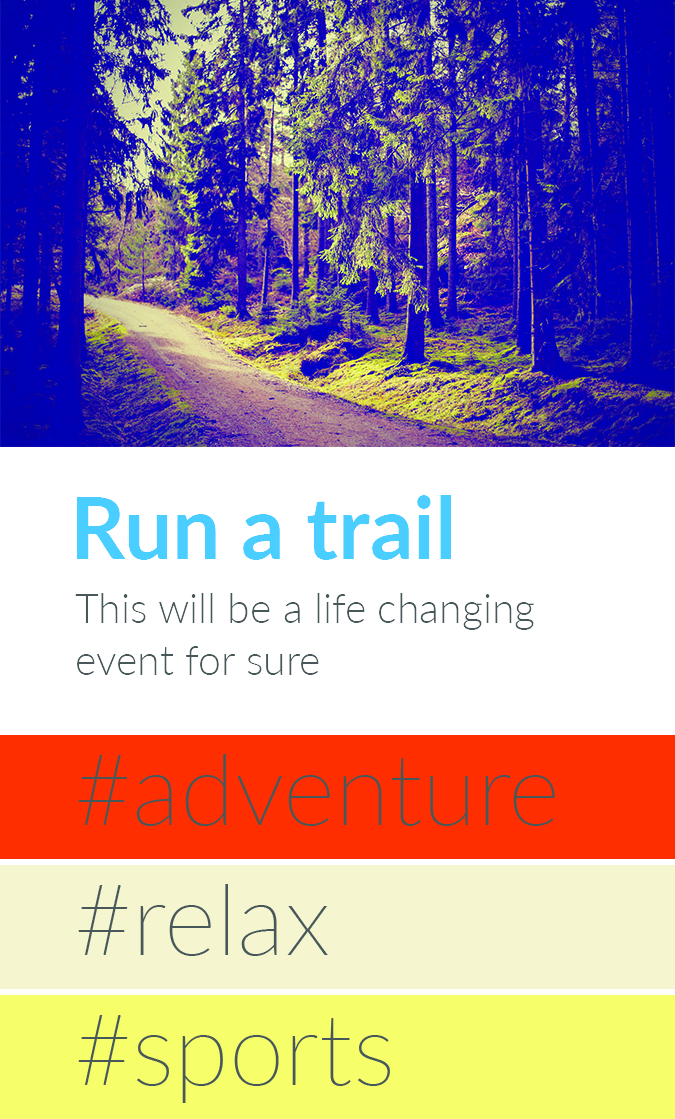
<style>
.page{position:relative;width:675px;height:1119px;background:#ffffff}
.page>*{position:absolute;margin:0}
.t1{font:86px "Lato-Bold";color:#4acdff}
.t2{font:41px/52px "Lato-Light";color:#48585a}
</style>
<div class="page">
<p class="t1" style="left:76px;top:495px;width:375px;height:65px">Run a trail</p>
<p class="t2" style="left:75px;top:593px;width:459px;height:82px;text-align:right">This will be a life changing event for sure</p>
</div>
